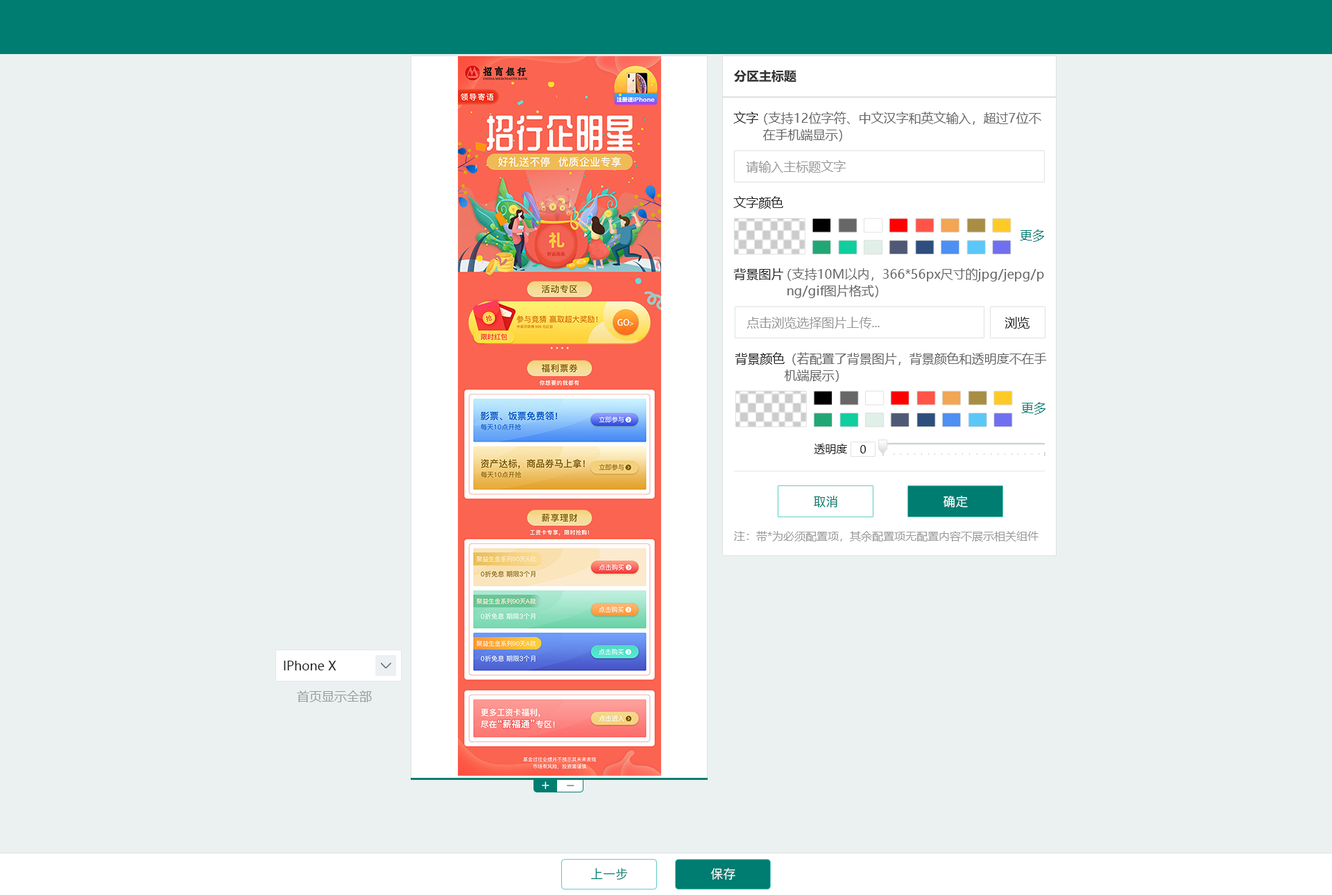
<style>
.page{position:relative;width:1332px;height:895px;background:#ebf1f1}
.page>*{position:absolute;margin:0}
.t1{font:12.5px "MicrosoftYaHei-Bold";color:#333333}
.t2{font:12.5px "MicrosoftYaHei";color:#222222}
.t3{font:12.5px/16.6px "MicrosoftYaHei";color:#666666}
.t4{font:12.5px "MicrosoftYaHei";color:#999999}
.t5{font:12.5px "MicrosoftYaHei";color:#007d71}
.t6{font:11.1px "MicrosoftYaHei";color:#222222}
.t7{font:12.5px "PingFang-SC-Medium";color:#007d71}
.t8{font:12.5px "PingFang-SC-Medium";color:#ffffff}
.t9{font:11.1px "MicrosoftYaHei";color:#999999}
.t10{font:13.9px "PingFang-SC-Medium";color:#ffffff}
.t11{font:13.9px "PingFang-SC-Medium"}
</style>
<div class="page">
<p class="t1" style="left:734px;top:70px;width:62px;height:13px">分区主标题</p>
<p class="t2" style="left:733px;top:112px;width:25px;height:11px">文字</p>
<p class="t3" style="left:763px;top:112px;width:278px;height:29px">（支持12位字符、中文汉字和英文输入，超过7位不<br>  在手机端显示）</p>
<p class="t4" style="left:746px;top:160px;width:99px;height:13px">请输入主标题文字</p>
<p class="t2" style="left:733px;top:196px;width:50px;height:13px">文字颜色</p>
<p class="t5" style="left:1020px;top:230px;width:24px;height:12px">更多</p>
<p class="t2" style="left:733px;top:268px;width:50px;height:12px">背景图片</p>
<p class="t3" style="left:787px;top:268px;width:257px;height:30px">（支持10M以内，366*56px尺寸的jpg/jepg/p<br>  ng/gif图片格式）</p>
<p class="t4" style="left:746px;top:317px;width:133px;height:12px">点击浏览选择图片上传...</p>
<p class="t2" style="left:1004px;top:317px;width:25px;height:12px">浏览</p>
<p class="t2" style="left:735px;top:352px;width:49px;height:13px">背景颜色</p>
<p class="t3" style="left:784px;top:352px;width:263px;height:30px">（若配置了背景图片，背景颜色和透明度不在手<br>机端展示）</p>
<p class="t5" style="left:1021px;top:402px;width:24px;height:13px">更多</p>
<p class="t6" style="left:814px;top:444px;width:33px;height:10px">透明度</p>
<p class="t6" style="left:860px;top:445px;width:6px;height:9px">0</p>
<p class="t7" style="left:814px;top:496px;width:23px;height:12px">取消</p>
<p class="t8" style="left:943px;top:496px;width:25px;height:12px">确定</p>
<p class="t9" style="left:734px;top:531px;width:304px;height:11px">注：带*为必须配置项，其余配置项无配置内容不展示相关组件</p>
<p class="t2" style="left:284px;top:661px;width:52px;height:10px">IPhone X</p>
<p class="t4" style="left:297px;top:691px;width:75px;height:12px">首页显示全部</p>
<p class="t10" style="left:542px;top:782px;width:7px;height:8px">+</p>
<p class="t11" style="left:567px;top:785px;width:7px;height:2px">_</p>
<p class="t7" style="left:591px;top:868px;width:37px;height:12px">上一步</p>
<p class="t8" style="left:710px;top:868px;width:25px;height:12px">保存</p>
</div>
